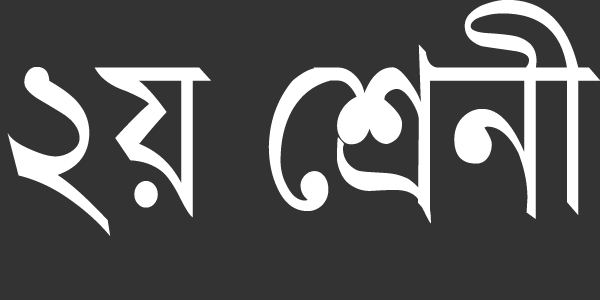
<style>
.page{position:relative;width:600px;height:300px;background:#333333}
.page>*{position:absolute;margin:0}
.t1{font:229.5px "KalpurushANSI";color:#ffffff;scale:0.87 1}
</style>
<div class="page">
<p class="t1" style="left:7px;top:0px;width:594px;height:236px">2q †kÖbx</p>
</div>
